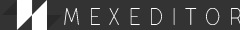
<style>
.page{position:relative;width:240px;height:30px;background:#333333}
.page>*{position:absolute;margin:0}
.t1{font:24px "FullSansLC-10Thin";color:#ffffff;scale:0.77 1}
</style>
<div class="page">
<p class="t1" style="left:64px;top:8px;width:178px;height:17px">M  E  X  E  D  I  T  O  R</p>
</div>
